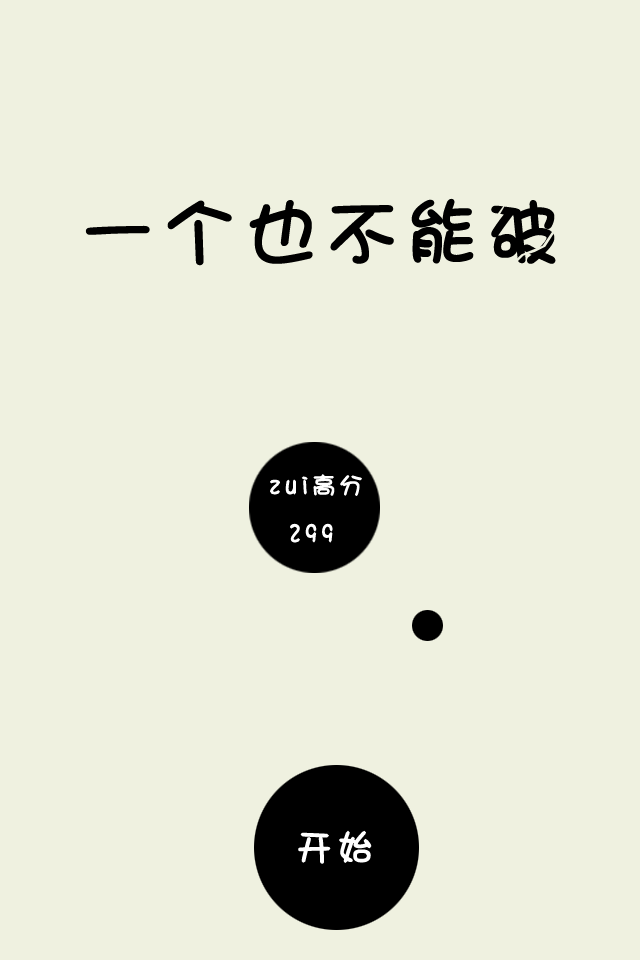
<style>
.page{position:relative;width:640px;height:960px;background:#eff1e0}
.page>*{position:absolute;margin:0}
.t1{font:24px "DFShaoNvW5";letter-spacing:0.24em;color:#ffffff;font-weight:bold}
.t2{font:36px "DFShaoNvW5";letter-spacing:0.24em;color:#ffffff;font-weight:bold}
</style>
<div class="page">
<p class="t1" style="left:270px;top:474px;width:92px;height:22px">zui高分</p>
<p class="t1" style="left:290px;top:523px;width:43px;height:20px">299</p>
<p class="t2" style="left:298px;top:830px;width:74px;height:34px">开始</p>
</div>
